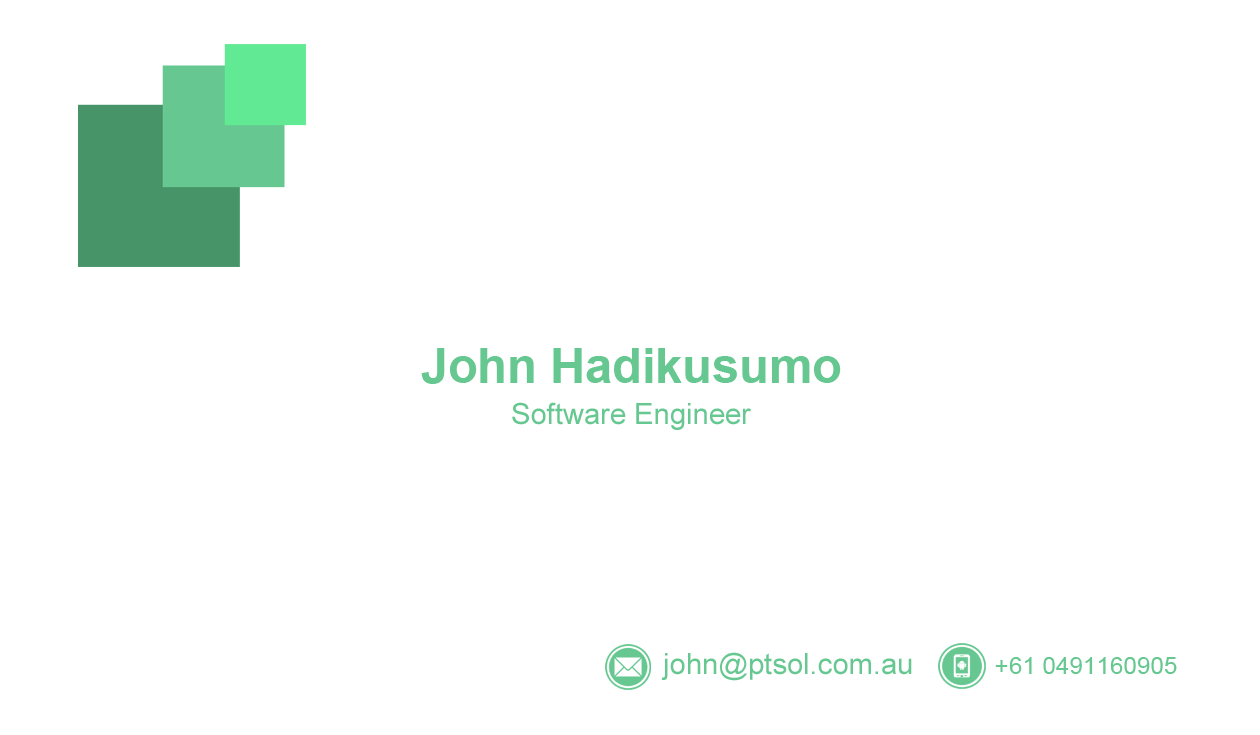
<style>
.page{position:relative;width:1260px;height:735px;background:#ffffff}
.page>*{position:absolute;margin:0}
.t1{font:48.6px "Arial-BoldMT";color:#66c890}
.t2{font:29.2px "ArialMT";color:#66c890}
.t3{font:24.3px "ArialMT";color:#66c890}
</style>
<div class="page">
<p class="t1" style="left:421px;top:348px;width:420px;height:36px">John Hadikusumo</p>
<p class="t2" style="left:512px;top:402px;width:239px;height:28px">Software Engineer</p>
<p class="t2" style="left:661px;top:652px;width:251px;height:29px">john@ptsol.com.au</p>
<p class="t3" style="left:995px;top:657px;width:182px;height:17px"><span class="t2"> </span>+61 0491160905</p>
</div>
